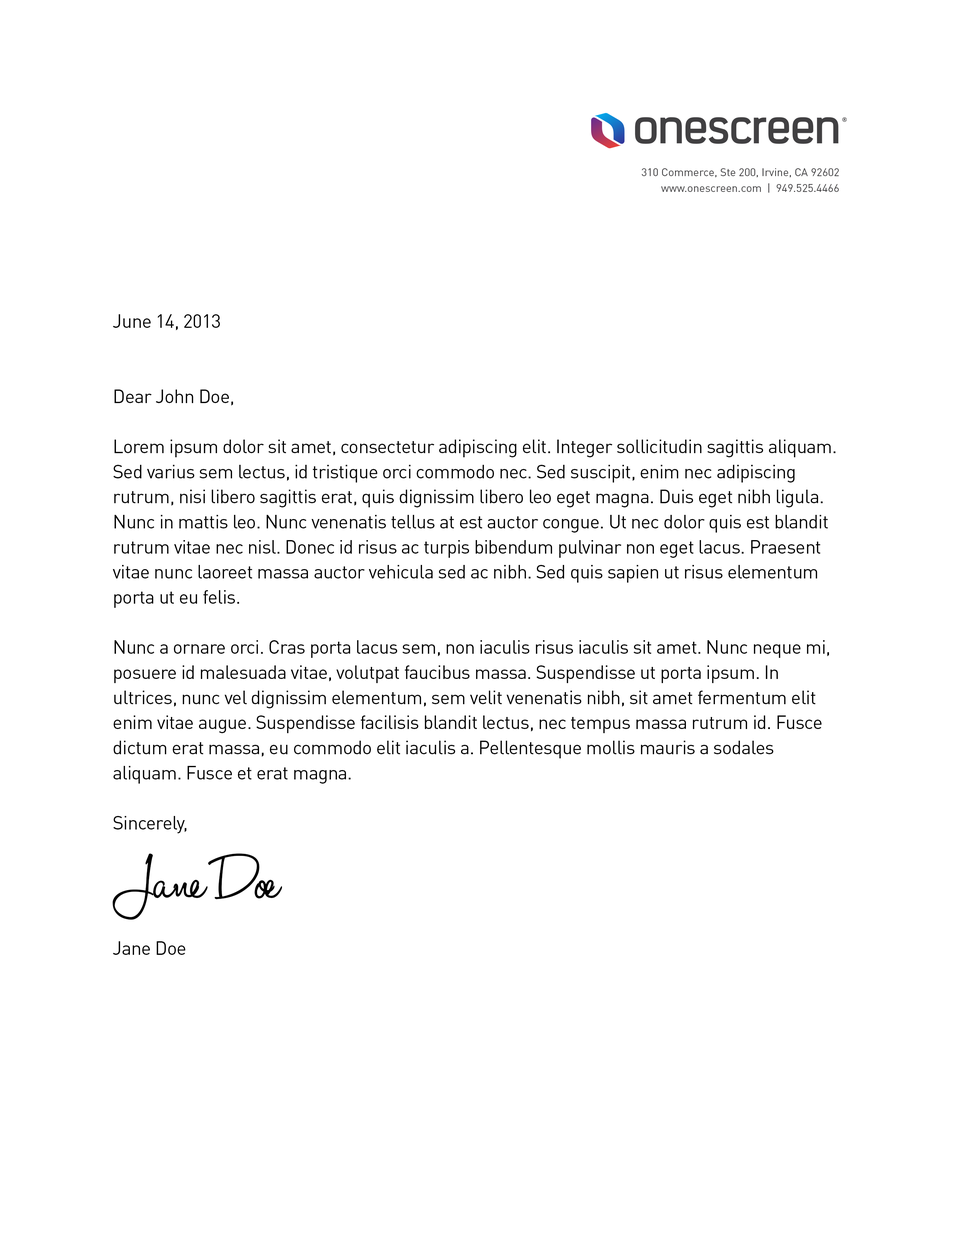
<style>
.page{position:relative;width:960px;height:1242px;background:#ffffff}
.page>*{position:absolute;margin:0}
.t1{font:11px "DINPro-Regular";color:#414042}
.t2{font:18.8px/25.1px "DINPro-Regular";letter-spacing:-0.025em;color:#010101}
.t3{font:70.6px "HaloHandletter";letter-spacing:-0.025em;color:#010101}
</style>
<div class="page">
<p class="t1" style="left:641px;top:168px;width:198px;height:10px">310 Commerce, Ste 200, Irvine, CA 92602</p>
<p class="t1" style="left:661px;top:183px;width:178px;height:10px">www.onescreen.com  |  949.525.4466</p>
<p class="t2" style="left:113px;top:314px;width:722px;height:641px">June 14, 2013<br><br><br>Dear John Doe,<br><br>Lorem ipsum dolor sit amet, consectetur adipiscing elit. Integer sollicitudin sagittis aliquam. Sed varius sem lectus, id tristique orci commodo nec. Sed suscipit, enim nec adipiscing rutrum, nisi libero sagittis erat, quis dignissim libero leo eget magna. Duis eget nibh ligula. Nunc in mattis leo. Nunc venenatis tellus at est auctor congue. Ut nec dolor quis est blandit rutrum vitae nec nisl. Donec id risus ac turpis bibendum pulvinar non eget lacus. Praesent vitae nunc laoreet massa auctor vehicula sed ac nibh. Sed quis sapien ut risus elementum porta ut eu felis.<br><br>Nunc a ornare orci. Cras porta lacus sem, non iaculis risus iaculis sit amet. Nunc neque mi, posuere id malesuada vitae, volutpat faucibus massa. Suspendisse ut porta ipsum. In ultrices, nunc vel dignissim elementum, sem velit venenatis nibh, sit amet fermentum elit enim vitae augue. Suspendisse facilisis blandit lectus, nec tempus massa rutrum id. Fusce dictum erat massa, eu commodo elit iaculis a. Pellentesque mollis mauris a sodales aliquam. Fusce et erat magna.<br><br>Sincerely,<br><br><br><br><br>Jane Doe</p>
<p class="t3" style="left:113px;top:853px;width:169px;height:67px">Jane Doe</p>
</div>
